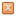
<style>
.page{position:relative;width:16px;height:16px;background:#ffffff}
.page>*{position:absolute;margin:0}
.t1{font:11.6px "UniversLTStd-Light";letter-spacing:0.1em;scale:0.95 1}
.t2{font:11.6px "UniversLTStd-Light";letter-spacing:0.1em;color:#fcfcfc;scale:0.95 1}
</style>
<div class="page">
<p class="t1" style="left:5px;top:6px;width:6px;height:6px">x</p>
<p class="t2" style="left:5px;top:5px;width:6px;height:6px">x</p>
</div>
